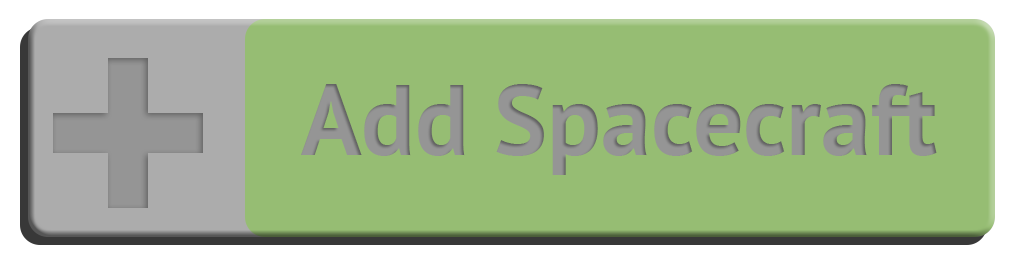
<style>
.page{position:relative;width:1024px;height:256px;background:#96bd73}
.page>*{position:absolute;margin:0}
.t1{font:100px "PTSans-Bold";color:#959595}
</style>
<div class="page">
<p class="t1" style="left:301px;top:84px;width:636px;height:91px">Add Spacecraft</p>
</div>
